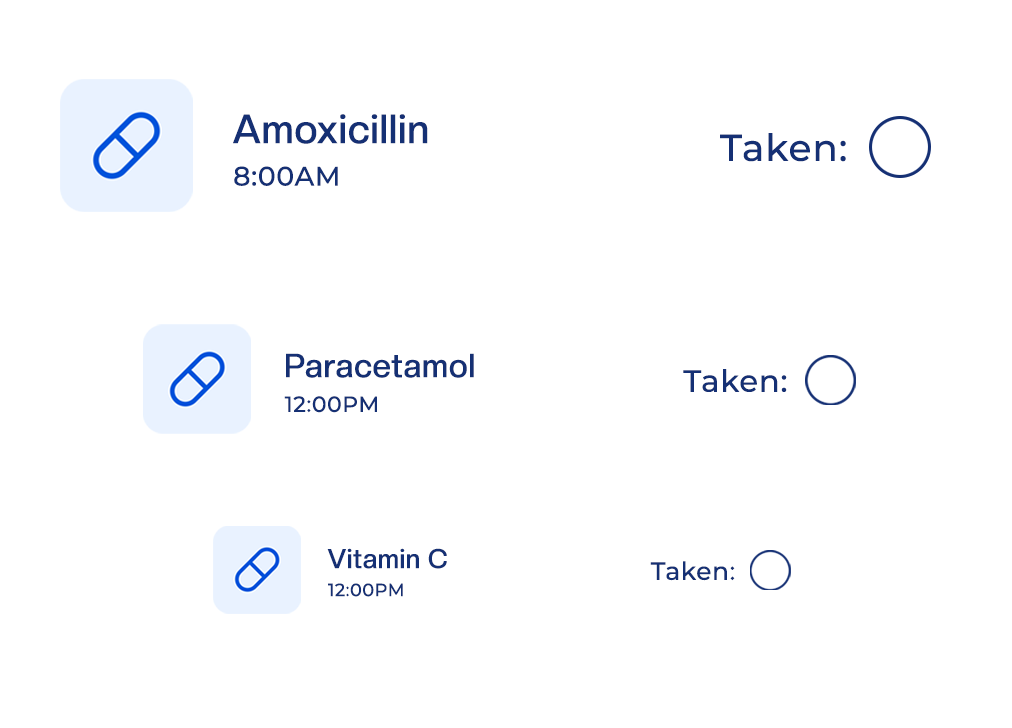
<style>
.page{position:relative;width:1012px;height:728px;background:#ffffff}
.page>*{position:absolute;margin:0}
.t1{font:40.1px "CreatoDisplay-Medium";letter-spacing:0.025em;color:#153074}
.t2{font:37.5px "Montserrat-Medium";letter-spacing:0.025em;color:#153074}
.t3{font:26.7px "Montserrat-Medium";letter-spacing:0.025em;color:#153074}
.t4{font:32.9px "CreatoDisplay-Medium";letter-spacing:0.025em;color:#153074}
.t5{font:30.7px "Montserrat-Medium";letter-spacing:0.025em;color:#153074}
.t6{font:21.9px "Montserrat-Medium";letter-spacing:0.025em;color:#153074}
.t7{font:26.6px "CreatoDisplay-Medium";letter-spacing:0.025em;color:#153074}
.t8{font:24.9px "Montserrat-Medium";letter-spacing:0.025em;color:#153074}
.t9{font:17.7px "Montserrat-Medium";letter-spacing:0.025em;color:#153074}
</style>
<div class="page">
<p class="t1" style="left:233px;top:114px;width:195px;height:30px">Amoxicillin</p>
<p class="t2" style="left:720px;top:133px;width:126px;height:29px">Taken:</p>
<p class="t3" style="left:234px;top:166px;width:104px;height:20px">8:00AM</p>
<p class="t4" style="left:286px;top:353px;width:188px;height:25px">Paracetamol</p>
<p class="t5" style="left:683px;top:369px;width:104px;height:23px">Taken:</p>
<p class="t6" style="left:284px;top:396px;width:93px;height:17px">12:00PM</p>
<p class="t7" style="left:327px;top:548px;width:120px;height:21px">Vitamin C</p>
<p class="t8" style="left:650px;top:561px;width:85px;height:20px">Taken:</p>
<p class="t9" style="left:328px;top:583px;width:75px;height:14px">12:00PM</p>
</div>
